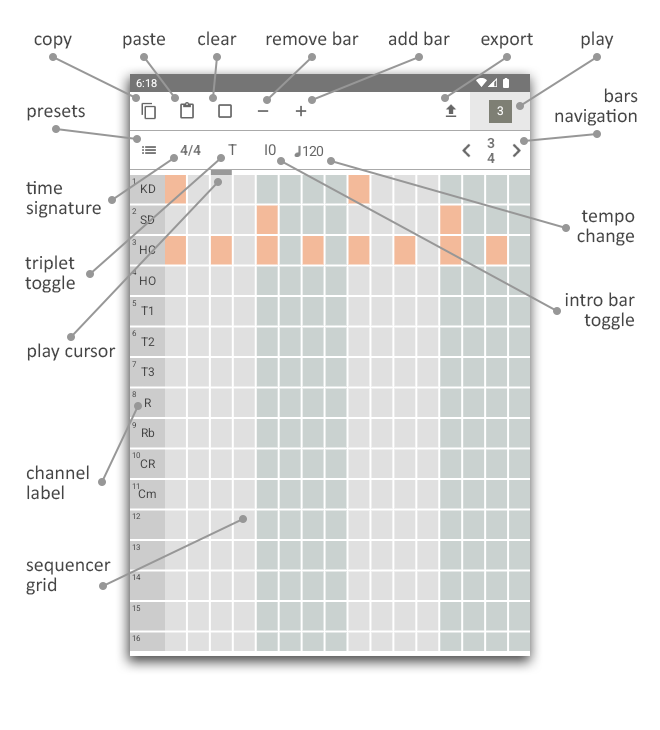
<style>
.page{position:relative;width:660px;height:730px;background:#ffffff}
.page>*{position:absolute;margin:0}
.t1{font:20px "Calibri";color:#454545}
.t2{font:20px/20px "Calibri";color:#454545}
</style>
<div class="page">
<p class="t1" style="left:34px;top:35px;width:38px;height:14px">copy</p>
<p class="t1" style="left:123px;top:33px;width:43px;height:16px">paste</p>
<p class="t1" style="left:198px;top:31px;width:39px;height:15px">clear</p>
<p class="t1" style="left:266px;top:31px;width:93px;height:15px">remove bar</p>
<p class="t1" style="left:388px;top:31px;width:62px;height:15px">add bar</p>
<p class="t1" style="left:481px;top:33px;width:52px;height:16px">export</p>
<p class="t1" style="left:581px;top:31px;width:33px;height:18px">play</p>
<p class="t2" style="left:555px;top:88px;width:83px;height:38px;text-align:right">bars<br>navigation</p>
<p class="t1" style="left:27px;top:105px;width:58px;height:16px">presets</p>
<p class="t2" style="left:26px;top:181px;width:75px;height:37px">time<br>signature</p>
<p class="t2" style="left:577px;top:210px;width:58px;height:36px;text-align:right">tempo<br>change</p>
<p class="t2" style="left:25px;top:255px;width:50px;height:38px">triplet<br>toggle</p>
<p class="t2" style="left:565px;top:292px;width:70px;height:38px;text-align:right">intro bar<br>toggle</p>
<p class="t1" style="left:27px;top:343px;width:89px;height:18px">play cursor</p>
<p class="t2" style="left:26px;top:465px;width:63px;height:35px">channel<br>label</p>
<p class="t2" style="left:26px;top:561px;width:85px;height:34px">sequencer<br>grid</p>
</div>
